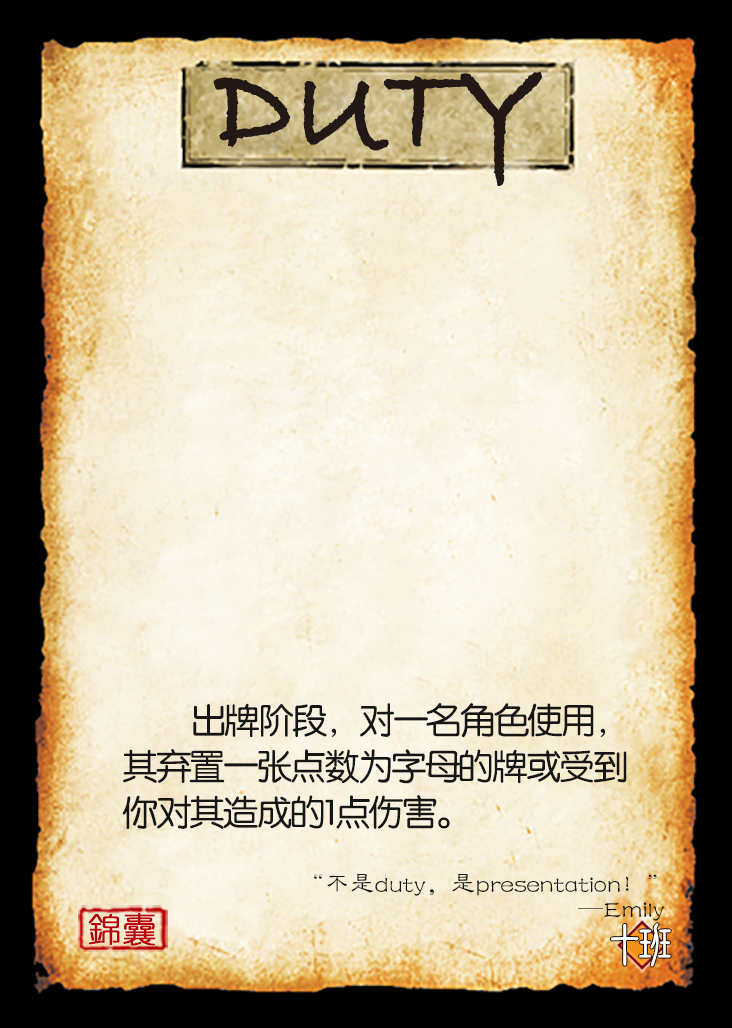
<style>
.page{position:relative;width:732px;height:1028px}
.page>*{position:absolute;margin:0}
.t1{font:129.2px "BradleyHandITCTT-Bold";color:#221815;scale:0.95 1}
.t2{font:35.4px/45.8px "FZY3JW--GB1-0";letter-spacing:-0.05em;color:#151515}
.t3{font:25px/25px "FZLBJW--GB1-0";color:#151515}
.t4{font:33.3px "YouYuan";color:#ba0007;font-weight:bold}
.t5{font:50px "DFNewChuan-W5-WINP-BF";letter-spacing:-0.4em;color:#ffffff}
</style>
<div class="page">
<p class="t1" style="left:213px;top:71px;width:329px;height:116px">DUTY</p>
<p class="t2" style="left:122px;top:703px;width:505px;height:126px">出牌阶段，对一名角色使用，其弃置一张点数为字母的牌或受到你对其造成的1点伤害。</p>
<p class="t3" style="left:314px;top:873px;width:351px;height:48px;text-align:right">“不是duty，是presentation！”<br>                                      —Emily</p>
<p class="t4" style="left:88px;top:913px;width:68px;height:33px">錦囊</p>
<p class="t5" style="left:611px;top:923px;width:60px;height:44px">十班</p>
</div>
